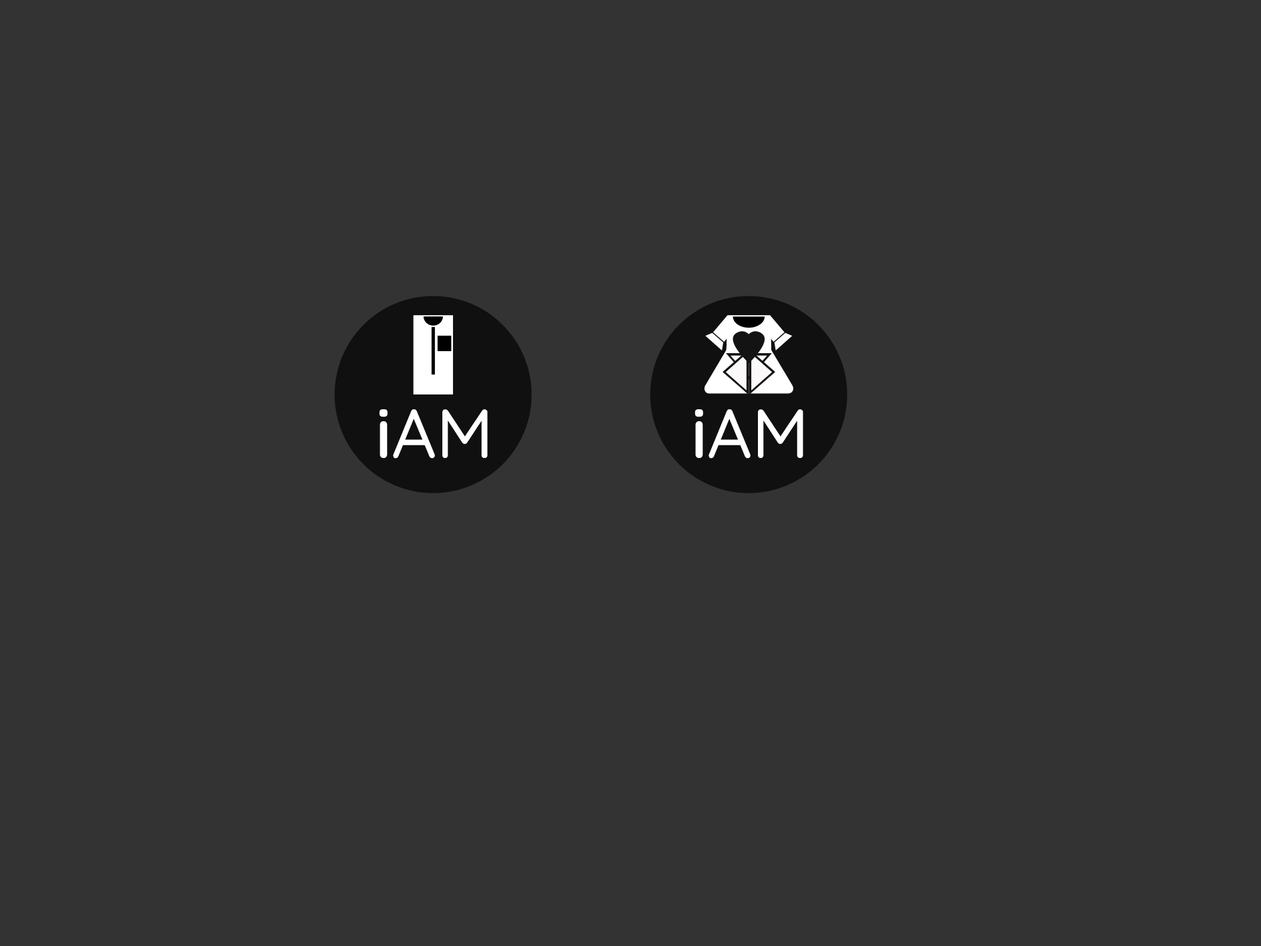
<style>
.page{position:relative;width:1261px;height:946px;background:#333333}
.page>*{position:absolute;margin:0}
.t1{font:69.2px "Quicksand-Medium";color:#ffffff}
.t2{font:69.2px "Quicksand-SemiBold";color:#ffffff}
</style>
<div class="page">
<p class="t1" style="left:379px;top:409px;width:109px;height:49px"><span class="t2">i</span>AM</p>
<p class="t1" style="left:695px;top:409px;width:108px;height:49px"><span class="t2">i</span>AM</p>
</div>
